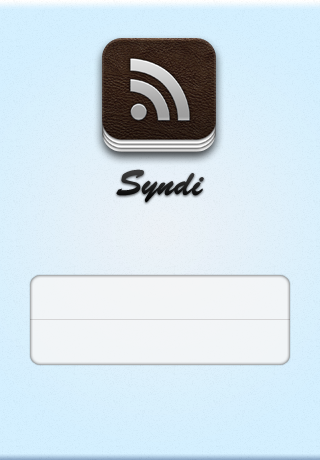
<style>
.page{position:relative;width:320px;height:460px}
.page>*{position:absolute;margin:0}
.t1{font:36px "BrushScriptStd";color:#1c1c1c}
</style>
<div class="page">
<p class="t1" style="left:116px;top:169px;width:88px;height:34px">Syndi</p>
</div>
